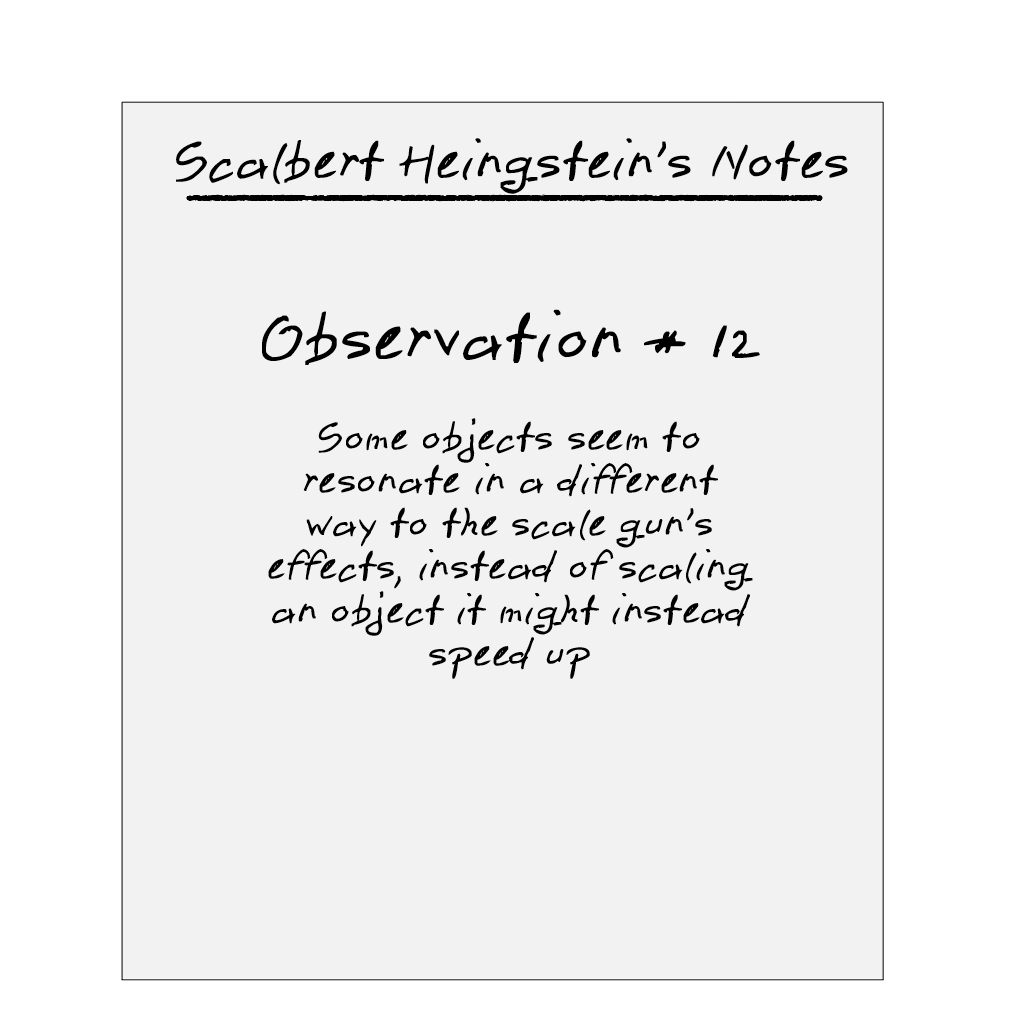
<style>
.page{position:relative;width:1024px;height:1024px;background:#f2f2f2}
.page>*{position:absolute;margin:0}
.t1{font:48px "pen2";color:#000000}
.t2{font:36px "pen2";color:#000000}
.t3{font:60px "pen2";color:#000000}
</style>
<div class="page">
<p class="t1" style="left:176px;top:138px;width:672px;height:56px">Scalbert Heingstein’s Notes</p>
<p class="t2" style="left:262px;top:309px;width:498px;height:370px;text-align:center"><span class="t3">Observation # 12<br></span><br>Some objects seem to<br>resonate in a different<br>way to the scale gun’s<br>effects, instead of scaling<br>an object it might instead<br>speed up</p>
</div>
